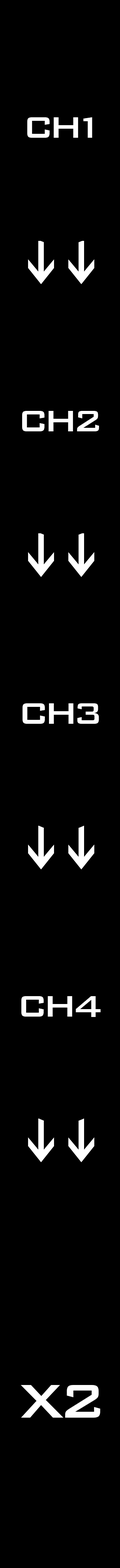
<style>
.page{position:relative;width:120px;height:1568px;background:#000000}
.page>*{position:absolute;margin:0}
.t1{font:39.4px "BankGothicBT-Medium";letter-spacing:-0.14em;color:#ffffff}
.t2{font:39.4px "BankGothicBT-Medium";letter-spacing:-0.24em;color:#ffffff}
.t3{font:39.4px "BankGothicBT-Medium";letter-spacing:-0.12em;color:#ffffff}
.t4{font:63px "BankGothicBT-Medium";letter-spacing:-0.08em;color:#ffffff}
</style>
<div class="page">
<p class="t1" style="left:27px;top:117px;width:65px;height:21px">C<span class="t2">H</span>1</p>
<p class="t1" style="left:22px;top:411px;width:77px;height:20px">CH2</p>
<p class="t1" style="left:22px;top:703px;width:77px;height:21px">CH3</p>
<p class="t1" style="left:21px;top:996px;width:79px;height:21px">C<span class="t3">H</span>4</p>
<p class="t4" style="left:20px;top:1385px;width:80px;height:33px">X2</p>
</div>
